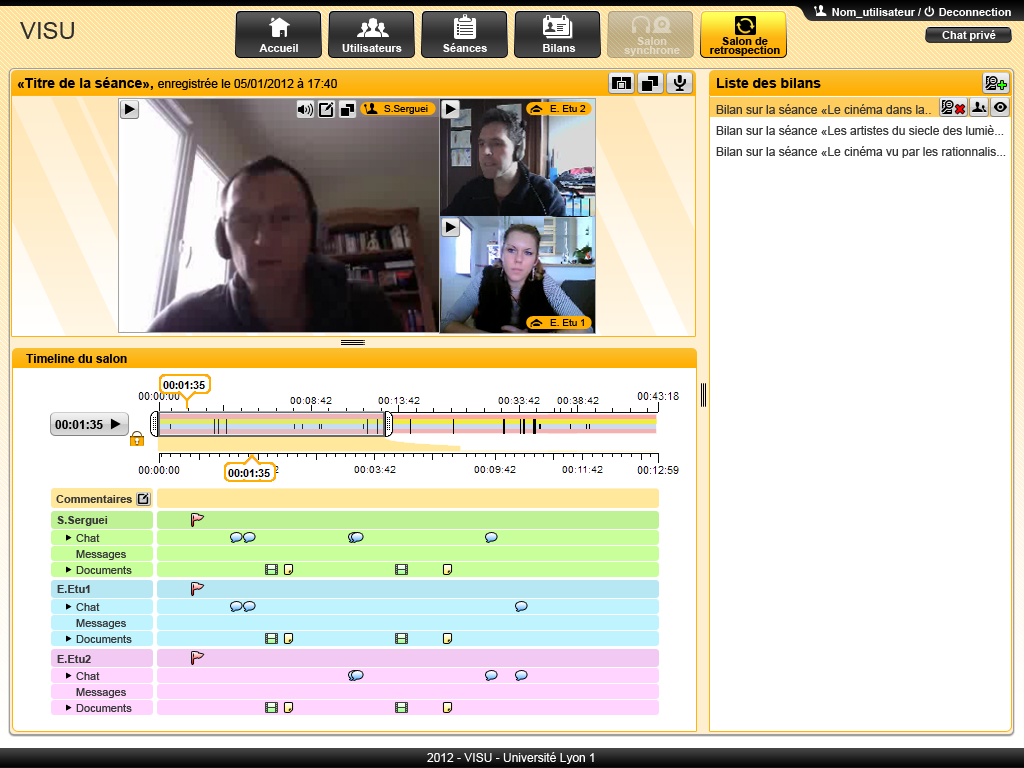
<style>
.page{position:relative;width:1024px;height:768px;background:#ffffff}
.page>*{position:absolute;margin:0}
.t1{font:11px "Arial-BoldMT";color:#ffffff}
.t2{font:24px "ArialMT";color:#2e2e2e}
.t3{font:11px/9px "Arial-BoldMT";color:#e3d8c2}
.t4{font:11px/9px "Arial-BoldMT";color:#000000}
.t5{font:12px "ArialMT";color:#000000}
.t6{font:14px "Arial-BoldMT";color:#000000}
.t7{font:14px "Arial-BoldMT";color:#24ff00}
.t8{font:10px "ArialMT";color:#000000}
.t9{font:12px "ArialMT";color:#373737}
.t10{font:19.3px "Arial-BoldMT";color:#ff0000}
.t11{font:12px "Arial-BoldMT";color:#000000}
.t12{font:11px "Arial-BoldMT";color:#373737}
.t13{font:11px "ArialMT";color:#373737}
.t14{font:12px "ArialMT";color:#fefefe}
</style>
<div class="page">
<p class="t1" style="left:832px;top:8px;width:89px;height:10px">Nom_utilisateur /</p>
<p class="t1" style="left:939px;top:8px;width:72px;height:8px">Deconnection</p>
<p class="t2" style="left:20px;top:22px;width:54px;height:17px">VISU</p>
<p class="t1" style="left:942px;top:30px;width:54px;height:11px">Chat privé</p>
<p class="t3" style="left:624px;top:37px;width:56px;height:19px;text-align:center">Salon<br>synchrone</p>
<p class="t4" style="left:710px;top:37px;width:70px;height:19px;text-align:center">Salon de<br>retrospection</p>
<p class="t1" style="left:259px;top:44px;width:39px;height:8px">Accueil</p>
<p class="t1" style="left:342px;top:44px;width:60px;height:8px">Utilisateurs</p>
<p class="t1" style="left:443px;top:43px;width:44px;height:9px">Séances</p>
<p class="t1" style="left:543px;top:44px;width:33px;height:8px">Bilans</p>
<p class="t5" style="left:17px;top:77px;width:320px;height:13px"><span class="t6">«Titre de la séance», </span>enregistrée le 05/01/2012 à 17:40</p>
<p class="t6" style="left:717px;top:78px;width:104px;height:10px">Liste des bilans</p>
<p class="t7" style="left:998px;top:81px;width:8px;height:8px">+</p>
<p class="t8" style="left:384px;top:105px;width:44px;height:9px">S.Serguei</p>
<p class="t8" style="left:550px;top:105px;width:36px;height:7px">E. Etu 2</p>
<p class="t9" style="left:716px;top:104px;width:215px;height:10px">Bilan sur la séance «Le cinéma dans la..</p>
<p class="t10" style="left:955px;top:105px;width:10px;height:9px;rotate:-45deg">+</p>
<p class="t9" style="left:716px;top:125px;width:288px;height:10px">Bilan sur la séance «Les artistes du siecle des lumiè...</p>
<p class="t9" style="left:716px;top:146px;width:290px;height:12px">Bilan sur la séance «Le cinéma vu par les rationnalis...</p>
<p class="t8" style="left:550px;top:319px;width:34px;height:7px">E. Etu 1</p>
<p class="t11" style="left:26px;top:354px;width:101px;height:9px">Timeline du salon</p>
<p class="t11" style="left:55px;top:420px;width:48px;height:9px">00:01:35</p>
<p class="t12" style="left:56px;top:495px;width:76px;height:8px">Commentaires</p>
<p class="t12" style="left:57px;top:516px;width:51px;height:10px">S.Serguei</p>
<p class="t13" style="left:76px;top:534px;width:24px;height:8px">Chat</p>
<p class="t13" style="left:76px;top:550px;width:50px;height:10px">Messages</p>
<p class="t13" style="left:76px;top:566px;width:56px;height:8px">Documents</p>
<p class="t12" style="left:57px;top:585px;width:33px;height:8px">E.Etu1</p>
<p class="t13" style="left:76px;top:603px;width:24px;height:8px">Chat</p>
<p class="t13" style="left:76px;top:619px;width:50px;height:10px">Messages</p>
<p class="t13" style="left:76px;top:635px;width:56px;height:8px">Documents</p>
<p class="t12" style="left:57px;top:655px;width:34px;height:8px">E.Etu2</p>
<p class="t13" style="left:76px;top:672px;width:24px;height:8px">Chat</p>
<p class="t13" style="left:76px;top:688px;width:50px;height:10px">Messages</p>
<p class="t13" style="left:76px;top:704px;width:56px;height:8px">Documents</p>
<p class="t14" style="left:427px;top:752px;width:167px;height:12px">2012 - VISU - Université Lyon 1</p>
</div>
